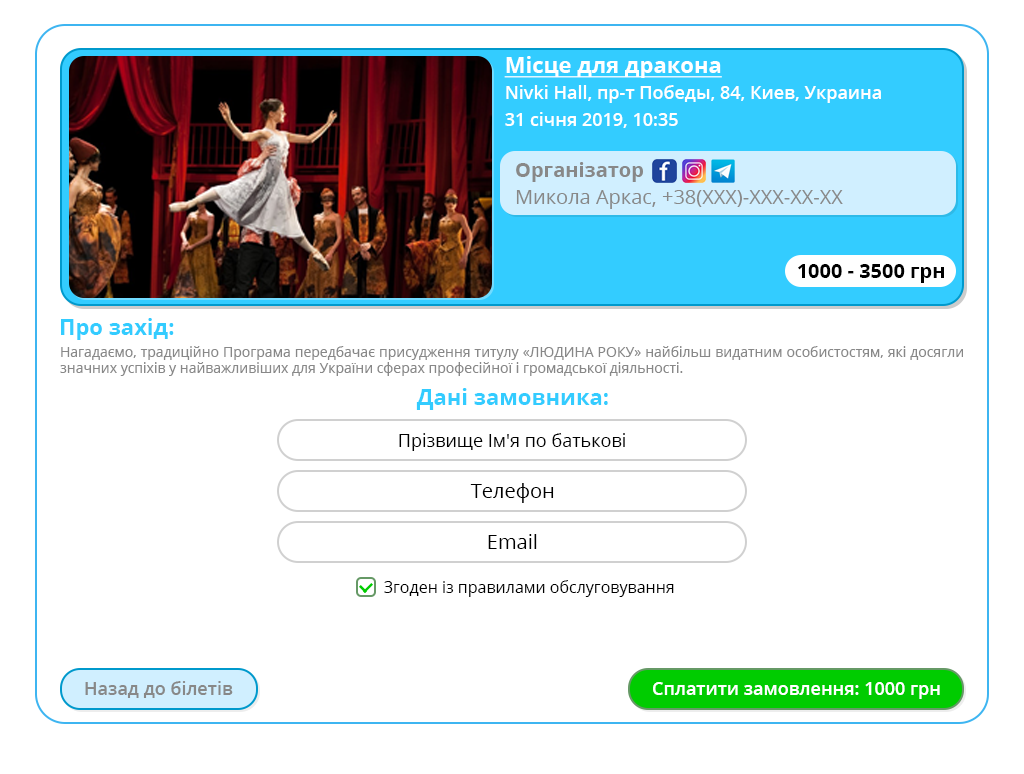
<style>
.page{position:relative;width:1024px;height:774px;background:#ffffff}
.page>*{position:absolute;margin:0}
.t1{font:22px "OpenSans-Bold";color:#ffffff;text-decoration:underline}
.t2{font:18px "OpenSans-Semibold";color:#ffffff}
.t3{font:20px/27px "OpenSans";color:#888888}
.t4{font:20px "OpenSans-Bold";color:#888888}
.t5{font:20px "OpenSans-Bold";color:#000000}
.t6{font:22px "OpenSans-Bold";color:#33ccff}
.t7{font:14px "OpenSans";color:#888888}
.t8{font:18px "OpenSans";color:#000000}
.t9{font:20px "OpenSans";color:#000000}
.t10{font:16px "OpenSans";color:#000000}
.t11{font:18px "OpenSans-Semibold";color:#888888}
</style>
<div class="page">
<p class="t1" style="left:504px;top:56px;width:218px;height:22px">Місце для дракона</p>
<p class="t2" style="left:506px;top:85px;width:375px;height:18px">Nivki Hall, пр-т Победы, 84, Киев, Украина</p>
<p class="t2" style="left:505px;top:112px;width:173px;height:16px">31 січня 2019, 10:35</p>
<p class="t3" style="left:516px;top:162px;width:327px;height:47px;text-align:justify"><span class="t4">Організатор<br></span>Микола Аркас, +38(ХХХ)-ХХХ-ХХ-ХХ</p>
<p class="t5" style="left:798px;top:264px;width:146px;height:19px">1000 - 3500 грн</p>
<p class="t6" style="left:61px;top:318px;width:113px;height:22px">Про захід:</p>
<p class="t7" style="left:60px;top:346px;width:903px;height:30px;text-align:justify">Нагадаємо, традиційно Програма передбачає присудження титулу «ЛЮДИНА РОКУ» найбільш видатним особистостям, які досягли значних успіхів у найважливіших для України сферах професійної і громадської діяльності.</p>
<p class="t6" style="left:416px;top:388px;width:192px;height:22px">Дані замовника:</p>
<p class="t8" style="left:399px;top:433px;width:226px;height:18px">Прізвище Ім'я по батькові</p>
<p class="t9" style="left:470px;top:483px;width:84px;height:20px">Телефон</p>
<p class="t9" style="left:488px;top:534px;width:49px;height:15px">Email</p>
<p class="t10" style="left:384px;top:580px;width:290px;height:17px">Згоден із правилами обслуговування</p>
<p class="t11" style="left:85px;top:681px;width:148px;height:17px">Назад до білетів</p>
<p class="t2" style="left:653px;top:682px;width:287px;height:17px">Сплатити замовлення: 1000 грн</p>
</div>
